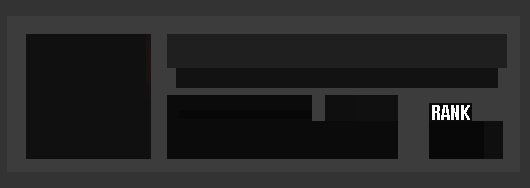
<style>
.page{position:relative;width:530px;height:188px;background:#3c3c3c}
.page>*{position:absolute;margin:0}
.t1{font:18.7px "Impact";color:#ffffff}
</style>
<div class="page">
<p class="t1" style="left:432px;top:105px;width:38px;height:15px">RANK</p>
</div>
